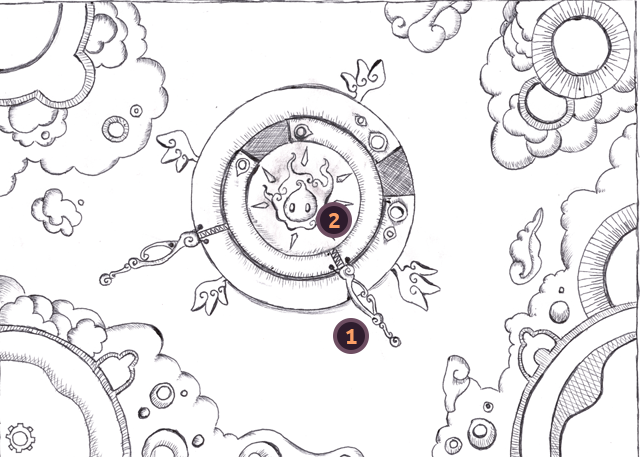
<style>
.page{position:relative;width:640px;height:457px;background:#ffffff}
.page>*{position:absolute;margin:0}
.t1{font:25px "UbuntuMono-Bold";color:#fc9f66}
</style>
<div class="page">
<p class="t1" style="left:329px;top:213px;width:11px;height:15px">2</p>
<p class="t1" style="left:346px;top:329px;width:11px;height:15px">1</p>
</div>
